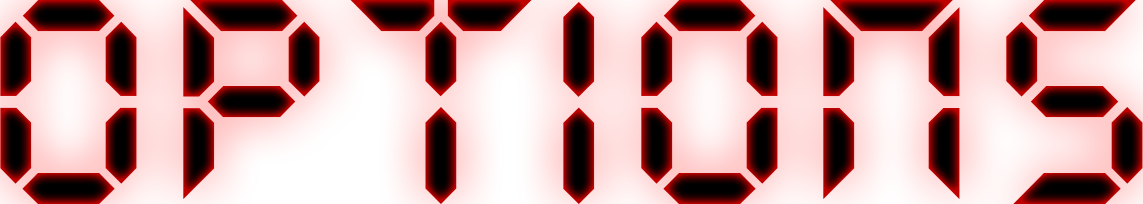
<style>
.page{position:relative;width:1143px;height:204px}
.page>*{position:absolute;margin:0}
.t1{font:291.7px "QuartzMS"}
</style>
<div class="page">
<p class="t1" style="left:0px;top:0px;width:1143px;height:204px">Options</p>
</div>
